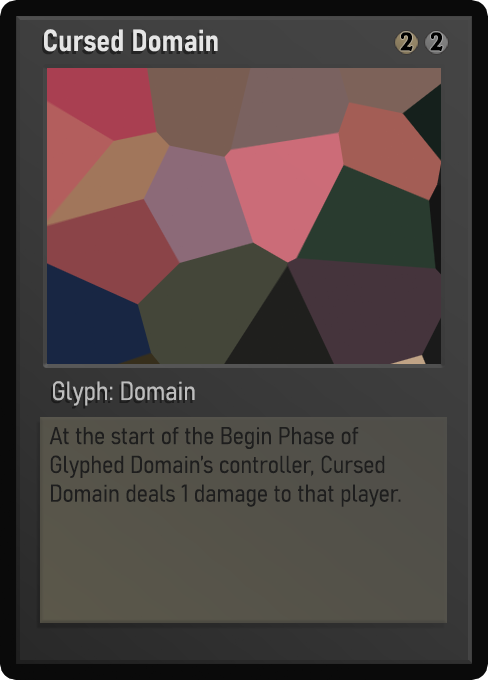
<style>
.page{position:relative;width:488px;height:680px}
.page>*{position:absolute;margin:0}
.t1{font:30px "Bahnschrift-SemiBoldSemiCondensed";color:#f2f2f2;font-weight:bold}
.t2{font:25px "WTRRoycroft";color:#000000;font-weight:bold;scale:1.09 1}
.t3{font:26px "Bahnschrift-LightSemiCondensed";color:#c8c8c8;font-weight:bold}
.t4{font:24px "Bahnschrift-LightSemiCondensed";color:#1e1e1e;font-weight:bold}
</style>
<div class="page">
<p class="t1" style="left:44px;top:29px;width:174px;height:23px;opacity:0.9">Cursed Domain</p>
<p class="t2" style="left:400px;top:32px;width:13px;height:19px">2</p>
<p class="t2" style="left:430px;top:32px;width:13px;height:19px">2</p>
<p class="t3" style="left:53px;top:381px;width:142px;height:25px;opacity:0.9">Glyph: Domain</p>
<p class="t4" style="left:49px;top:427px;width:352px;height:80px">At the start of the Begin Phase of Glyphed Domain’s controller, Cursed Domain deals 1 damage to that player.</p>
</div>
